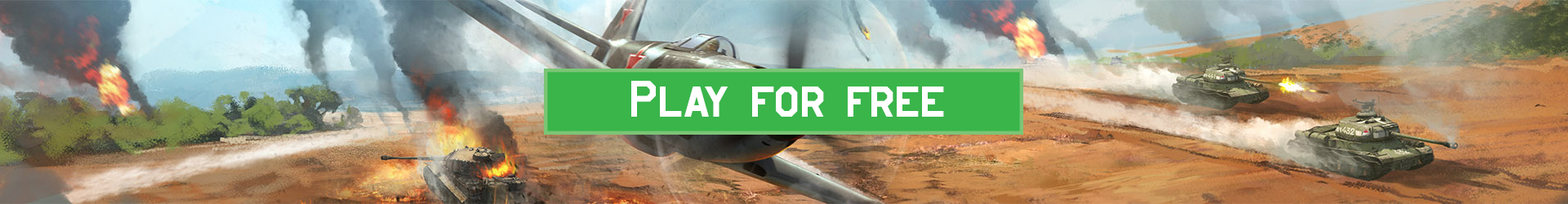
<style>
.page{position:relative;width:1568px;height:204px}
.page>*{position:absolute;margin:0}
.t1{font:58.8px "Jefferies";color:#ffffff}
</style>
<div class="page">
<p class="t1" style="left:631px;top:81px;width:313px;height:36px">Play for free</p>
</div>
